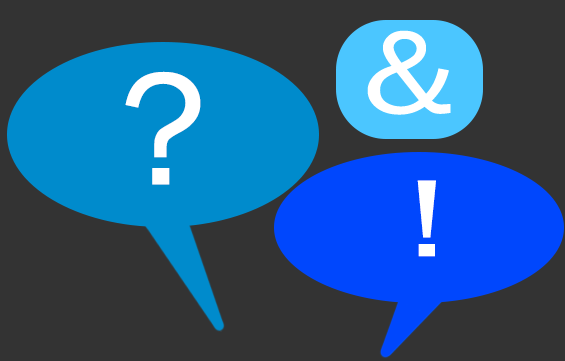
<style>
.page{position:relative;width:565px;height:361px;background:#333333}
.page>*{position:absolute;margin:0}
.t1{font:164.7px "FranklinGothic-Book";letter-spacing:-0.1em;color:#ffffff;font-weight:bold}
.t2{font:112.8px "FranklinGothic-Book";letter-spacing:-0.1em;color:#ffffff;font-weight:bold;scale:1.37 1}
</style>
<div class="page">
<p class="t1" style="left:125px;top:71px;width:76px;height:114px">?</p>
<p class="t2" style="left:417px;top:180px;width:19px;height:77px">!</p>
</div>
